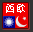
<style>
.page{position:relative;width:33px;height:32px;background:#333333}
.page>*{position:absolute;margin:0}
.t1{font:10.4px "SimSun";color:#ffffff}
</style>
<div class="page">
<p class="t1" style="left:6px;top:4px;width:19px;height:9px">西欧</p>
</div>
